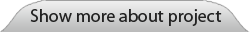
<style>
.page{position:relative;width:250px;height:32px}
.page>*{position:absolute;margin:0}
.t1{font:18px "MyriadPro-Regular";color:#222222}
</style>
<div class="page">
<p class="t1" style="left:30px;top:9px;width:192px;height:17px">Show more about project</p>
</div>
